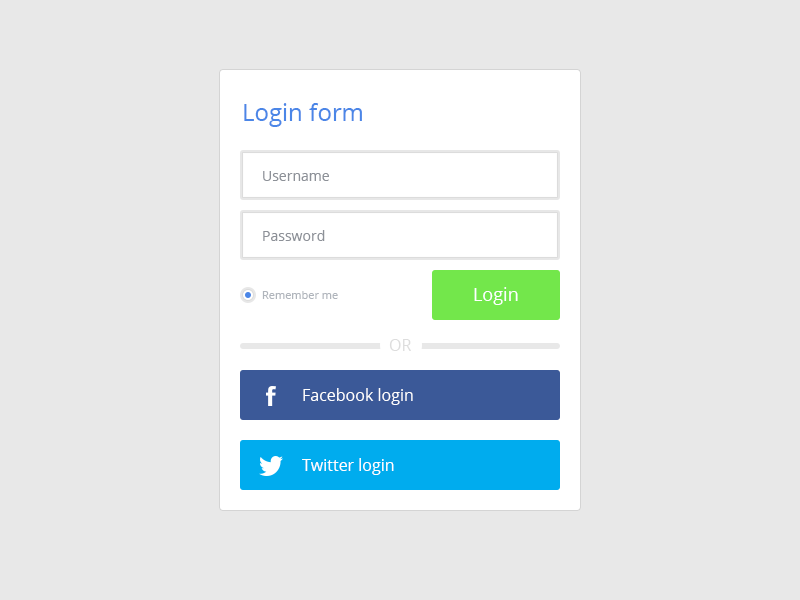
<style>
.page{position:relative;width:800px;height:600px;background:#e8e8e8}
.page>*{position:absolute;margin:0}
.t1{font:24px "OpenSans";color:#4b86e7}
.t2{font:14px "OpenSans";color:#8d9198}
.t3{font:11px "OpenSans";color:#b0b5bc}
.t4{font:18px "OpenSans";color:#ffffff}
.t5{font:16px "OpenSans";color:#dddddd}
.t6{font:16px "OpenSans";color:#ffffff}
</style>
<div class="page">
<p class="t1" style="left:244px;top:103px;width:118px;height:24px">Login form</p>
<p class="t2" style="left:263px;top:171px;width:66px;height:10px">Username</p>
<p class="t2" style="left:263px;top:230px;width:62px;height:11px">Password</p>
<p class="t3" style="left:262px;top:291px;width:76px;height:8px">Remember me</p>
<p class="t4" style="left:474px;top:287px;width:44px;height:18px">Login</p>
<p class="t5" style="left:389px;top:339px;width:22px;height:12px">OR</p>
<p class="t6" style="left:303px;top:388px;width:110px;height:17px">Facebook login</p>
<p class="t6" style="left:302px;top:458px;width:92px;height:17px">Twitter login</p>
</div>
